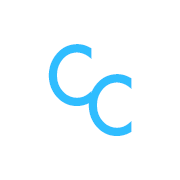
<style>
.page{position:relative;width:180px;height:180px;background:#ffffff}
.page>*{position:absolute;margin:0}
.t1{font:79.2px "Futura-Medium";color:#2fbdff;scale:0.91 1}
</style>
<div class="page">
<p class="t1" style="left:48px;top:44px;width:44px;height:62px">C</p>
<p class="t1" style="left:88px;top:74px;width:44px;height:62px">C</p>
</div>
